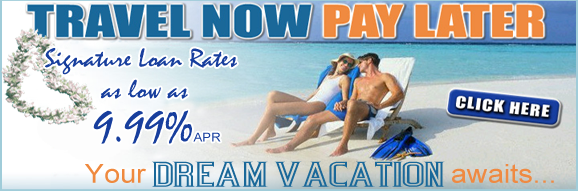
<style>
.page{position:relative;width:578px;height:191px}
.page>*{position:absolute;margin:0}
.t1{font:26.2px "Mistral";color:#173e9d;scale:1.1 1}
.t2{font:43.5px "Mistral";color:#173e9d;scale:1.1 1}
.t3{font:12px "ArialMT";color:#173e9d;scale:1.1 1}
.t4{font:25px "Bicycle";color:#1a6899;scale:1.6 1}
.t5{font:26.2px "ArialMT";color:#ef8a42;scale:1.1 1}
.t6{font:26.2px "ArialMT";color:#ef893e;scale:1.1 1}
</style>
<div class="page">
<p class="t1" style="left:45px;top:48px;width:192px;height:51px;text-align:center">Signature Loan Rates <br>as low as</p>
<p class="t2" style="left:93px;top:110px;width:128px;height:34px">9.99%<span class="t3">APR</span></p>
<p class="t4" style="left:152px;top:161px;width:293px;height:26px">Dream Vacation</p>
<p class="t5" style="left:85px;top:164px;width:469px;height:19px"><span class="t6">Your                      </span>awaits...</p>
</div>
